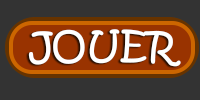
<style>
.page{position:relative;width:200px;height:100px;background:#333333}
.page>*{position:absolute;margin:0}
.t1{font:37px "KristenITC-Regular";color:#ffffff}
</style>
<div class="page">
<p class="t1" style="left:28px;top:29px;width:153px;height:38px">JOUER</p>
</div>
